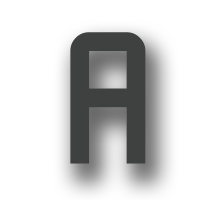
<style>
.page{position:relative;width:215px;height:200px;background:#ffffff}
.page>*{position:absolute;margin:0}
.t1{font:150px "Manteka";color:#3f4040}
</style>
<div class="page">
<p class="t1" style="left:70px;top:32px;width:76px;height:132px">a</p>
</div>
